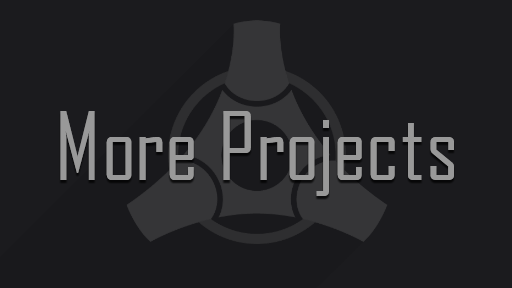
<style>
.page{position:relative;width:512px;height:288px;background:#1b1b1e}
.page>*{position:absolute;margin:0}
.t1{font:90px "AgencyFB-Reg";letter-spacing:0.02em;color:#999999}
</style>
<div class="page">
<p class="t1" style="left:60px;top:111px;width:394px;height:85px">More Projects</p>
</div>
